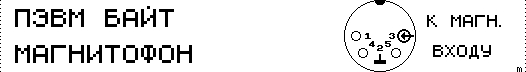
<style>
.page{position:relative;width:526px;height:72px;background:#ffffff}
.page>*{position:absolute;margin:0}
.t1{font:24px "ZX 6x8";color:#000000}
.t2{font:16px "ZX 6x8";color:#000000}
</style>
<div class="page">
<p class="t1" style="left:15px;top:6px;width:159px;height:21px">ПЭВМ БАЙТ</p>
<p class="t2" style="left:427px;top:15px;width:74px;height:12px">К МАГН.</p>
<p class="t1" style="left:15px;top:45px;width:177px;height:18px">МАГНИТОФОН</p>
<p class="t2" style="left:433px;top:45px;width:58px;height:14px">ВХОДУ</p>
</div>
